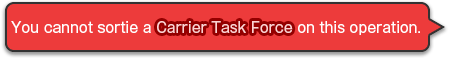
<style>
.page{position:relative;width:450px;height:58px;background:#ed3b3b}
.page>*{position:absolute;margin:0}
.t1{font:14px "GothicMB101Pro-Regular";color:#ffffff}
.t2{font:14px "GothicMB101Pro-Regular";color:#ffd3d3}
</style>
<div class="page">
<p class="t1" style="left:11px;top:21px;width:409px;height:14px">You cannot sortie a <span class="t2">Carrier Task Force</span> on this operation.</p>
<p class="t1" style="left:11px;top:21px;width:409px;height:14px">You cannot sortie a <span class="t2">Carrier Task Force</span> on this operation.</p>
</div>
